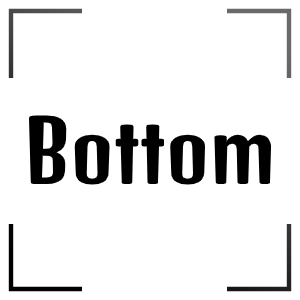
<style>
.page{position:relative;width:300px;height:300px;background:#ffffff}
.page>*{position:absolute;margin:0}
.t1{font:83px "DenkOne-Regular";color:#000000}
</style>
<div class="page">
<p class="t1" style="left:29px;top:115px;width:243px;height:70px">Bottom</p>
</div>
